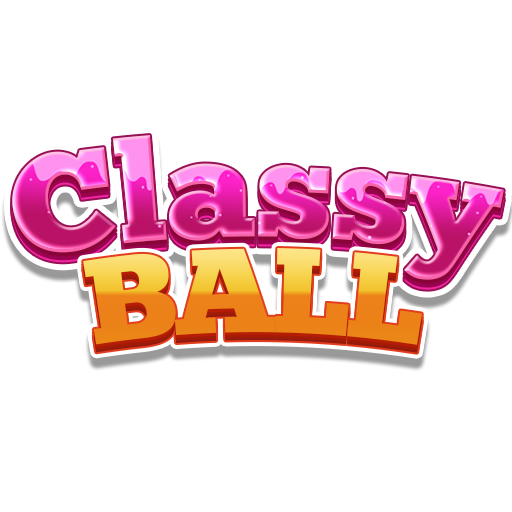
<style>
.page{position:relative;width:512px;height:512px;background:#ffffff}
.page>*{position:absolute;margin:0}
.t1{font:139.6px "ChunkFiveEx"}
.t2{font:119.6px "ChunkFiveEx";letter-spacing:-0.04em}
</style>
<div class="page">
<p class="t1" style="left:12px;top:135px;width:492px;height:145px">Classy</p>
<p class="t2" style="left:83px;top:248px;width:339px;height:97px">BALL</p>
</div>
